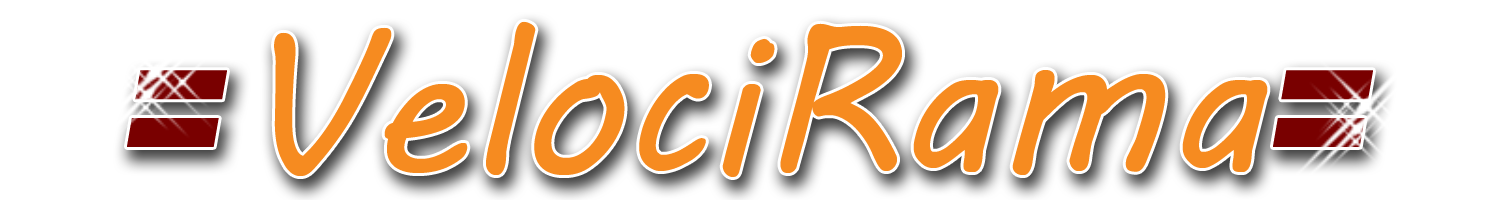
<style>
.page{position:relative;width:1500px;height:200px;background:#ffffff}
.page>*{position:absolute;margin:0}
.t1{font:200px "MVBoli";color:#f68b20}
.t2{font:200px "FasterOne-Regular";color:#790000}
</style>
<div class="page">
<p class="t1" style="left:127px;top:21px;width:1246px;height:156px"><span class="t2">=</span>VelociRama<span class="t2">=</span></p>
</div>
